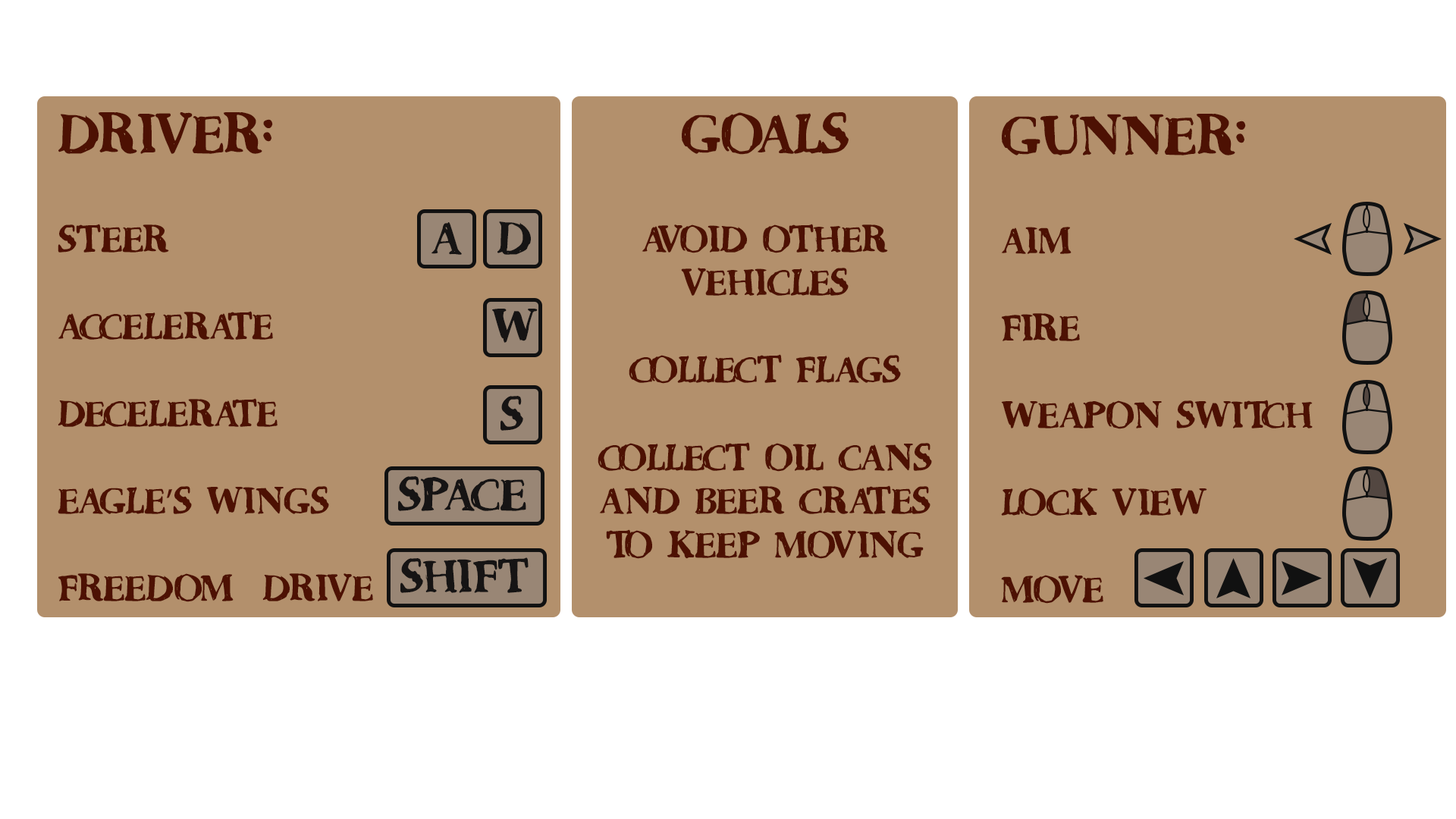
<style>
.page{position:relative;width:1456px;height:819px;background:#b3906c}
.page>*{position:absolute;margin:0}
.t1{font:36.4px "CountryGold";color:#4d1103}
.t2{font:54.6px "CountryGold";color:#4d1103}
.t3{font:36.4px "MyriadPro-Regular";color:#4d1103}
.t4{font:45.5px "CountryGold";color:#161414}
</style>
<div class="page">
<p class="t1" style="left:58px;top:112px;width:315px;height:490px"><span class="t2">DRIVER:<br><br></span>STEER<br><br>ACCELERATE<br><br>DECELERATE<br><br>EAGLE<span class="t3">’</span>S WINGS<br><br>FREEDOM  DRIVE</p>
<p class="t1" style="left:598px;top:112px;width:334px;height:447px;text-align:center"><span class="t2">GOALS<br><br></span>AVOID OTHER<br>VEHICLES<br><br>COLLECT FLAGS<br><br>COLLECT OIL CANS<br>AND BEER CRATES<br>TO KEEP MOVING</p>
<p class="t1" style="left:1001px;top:114px;width:312px;height:490px"><span class="t2">GUNNER:<br><br></span>AIM<br><br>FIRE<br><br>WEAPON SWITCH<br><br>LOCK VIEW<br><br>MOVE</p>
<p class="t4" style="left:497px;top:221px;width:34px;height:34px">D</p>
<p class="t4" style="left:431px;top:222px;width:31px;height:33px">A</p>
<p class="t4" style="left:492px;top:309px;width:46px;height:34px">W</p>
<p class="t4" style="left:500px;top:396px;width:23px;height:35px">S</p>
<p class="t4" style="left:398px;top:476px;width:128px;height:35px">SPACE</p>
<p class="t4" style="left:400px;top:557px;width:129px;height:36px">SHIFT</p>
</div>
